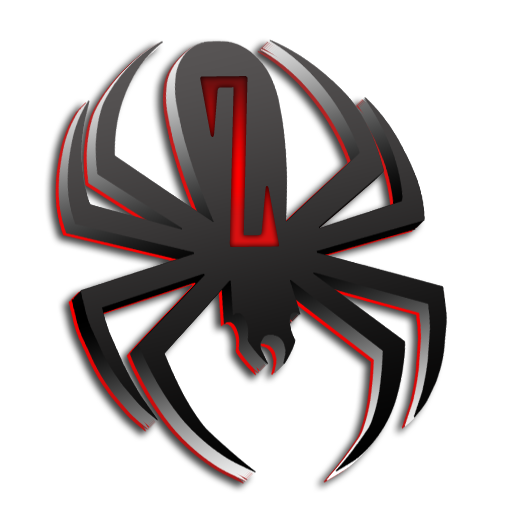
<style>
.page{position:relative;width:512px;height:512px;background:#ffffff}
.page>*{position:absolute;margin:0}
.t1{font:230.9px "BirchStd";scale:0.8 1}
</style>
<div class="page">
<p class="t1" style="left:200px;top:76px;width:79px;height:171px;rotate:-1deg">Z</p>
</div>
